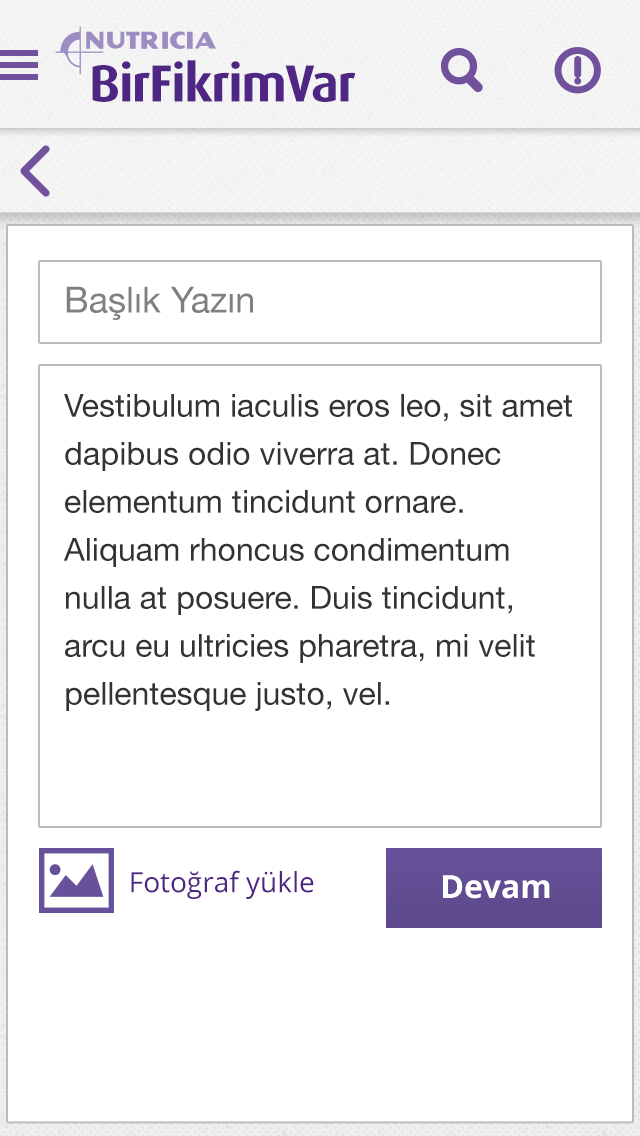
<style>
.page{position:relative;width:640px;height:1136px;background:#ffffff}
.page>*{position:absolute;margin:0}
.t1{font:52.5px "DaxPro-Bold";letter-spacing:-0.025em;color:#4f2683}
.t2{font:36px "HelveticaNeue";color:#808080}
.t3{font:32px/48px "HelveticaNeue";color:#313435}
.t4{font:28px "OpenSans";color:#4f2583}
.t5{font:32px "OpenSans-Bold";color:#ffffff}
</style>
<div class="page">
<p class="t1" style="left:92px;top:60px;width:264px;height:42px">BirFikrimVar</p>
<p class="t2" style="left:66px;top:286px;width:187px;height:34px">Başlık Yazın</p>
<p class="t3" style="left:63px;top:394px;width:509px;height:317px">Vestibulum iaculis eros leo, sit amet dapibus odio viverra at. Donec elementum tincidunt ornare. Aliquam rhoncus condimentum nulla at posuere. Duis tincidunt, arcu eu ultricies pharetra, mi velit pellentesque justo, vel.</p>
<p class="t4" style="left:131px;top:870px;width:183px;height:29px">Fotoğraf yükle</p>
<p class="t5" style="left:443px;top:875px;width:107px;height:24px">Devam</p>
</div>
